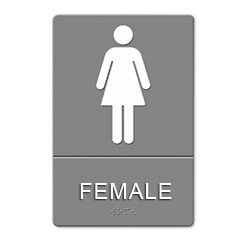
<style>
.page{position:relative;width:240px;height:240px;background:#ffffff}
.page>*{position:absolute;margin:0}
.t1{font:22px "ArialMT";letter-spacing:0.05em;color:#ffffff}
</style>
<div class="page">
<p class="t1" style="left:80px;top:183px;width:92px;height:16px">FEMALE</p>
</div>
